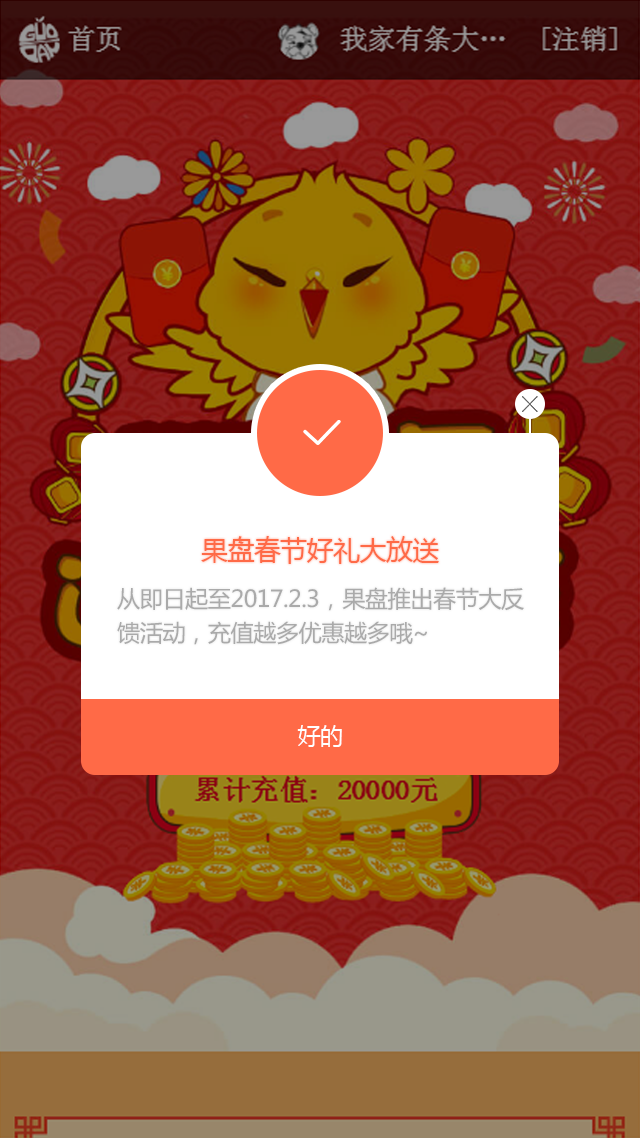
<style>
.page{position:relative;width:640px;height:1138px}
.page>*{position:absolute;margin:0}
.t1{font:27px "MicrosoftYaHei";letter-spacing:-0.02em;color:#ff6a47}
.t2{font:23.2px/34.2px "MicrosoftYaHei";letter-spacing:-0.02em;color:#aaaaaa}
.t3{font:23px "MicrosoftYaHei";letter-spacing:-0.02em;color:#ffffff}
</style>
<div class="page">
<p class="t1" style="left:201px;top:536px;width:238px;height:28px">果盘春节好礼大放送</p>
<p class="t2" style="left:117px;top:587px;width:407px;height:58px">从即日起至2017.2.3，果盘推出春节大反<br>馈活动，充值越多优惠越多哦~</p>
<p class="t3" style="left:297px;top:725px;width:45px;height:22px">好的</p>
</div>
